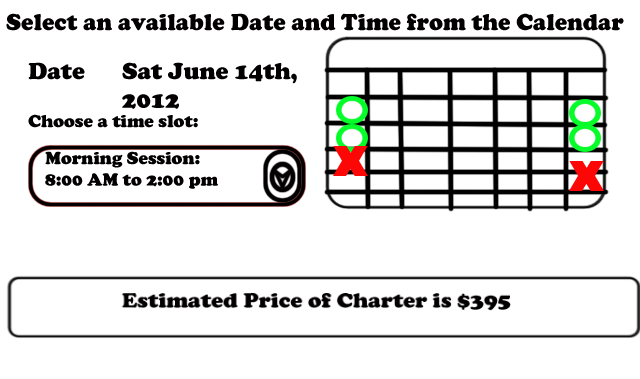
<style>
.page{position:relative;width:640px;height:379px;background:#ffffff}
.page>*{position:absolute;margin:0}
.t1{font:24px "CooperBlack";color:#020000}
.t2{font:18px "CooperBlack";color:#020000}
</style>
<div class="page">
<p class="t1" style="left:6px;top:13px;width:618px;height:18px">Select an available Date and Time from the Calendar</p>
<p class="t1" style="left:28px;top:62px;width:57px;height:18px">Date</p>
<p class="t1" style="left:122px;top:62px;width:175px;height:47px">Sat June 14th, 2012</p>
<p class="t2" style="left:28px;top:114px;width:170px;height:14px">Choose a time slot:</p>
<p class="t2" style="left:45px;top:151px;width:173px;height:38px">Morning Session: <br>8:00 AM to 2:00 pm</p>
</div>
